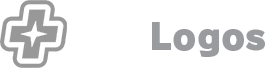
<style>
.page{position:relative;width:266px;height:68px;background:#ffffff}
.page>*{position:absolute;margin:0}
.t1{font:36px "RodinPro-UB";color:#999b9e}
</style>
<div class="page">
<p class="t1" style="left:152px;top:22px;width:113px;height:35px">Logos</p>
</div>
